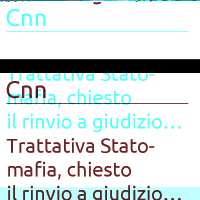
<style>
.page{position:relative;width:200px;height:200px;background:#ffffff}
.page>*{position:absolute;margin:0}
.t1{font:23.9px "Ubuntu";color:#4effff}
.t2{font:19.9px "Ubuntu"}
</style>
<div class="page">
<p class="t1" style="left:6px;top:8px;width:40px;height:18px">Cnn</p>
<p class="t2" style="left:6px;top:65px;width:175px;height:67px">Trattativa Stato-mafia, chiesto <br>il rinvio a giudizio…</p>
</div>
